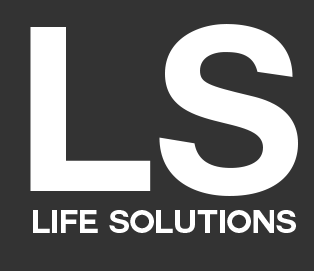
<style>
.page{position:relative;width:314px;height:271px;background:#333333}
.page>*{position:absolute;margin:0}
.t1{font:230px "Couture-Bold";color:#ffffff}
.t2{font:32px "Couture-Bold";color:#ffffff}
</style>
<div class="page">
<p class="t1" style="left:30px;top:24px;width:268px;height:172px">LS</p>
<p class="t2" style="left:33px;top:210px;width:263px;height:23px">LIFE SOLUTIONS</p>
</div>
